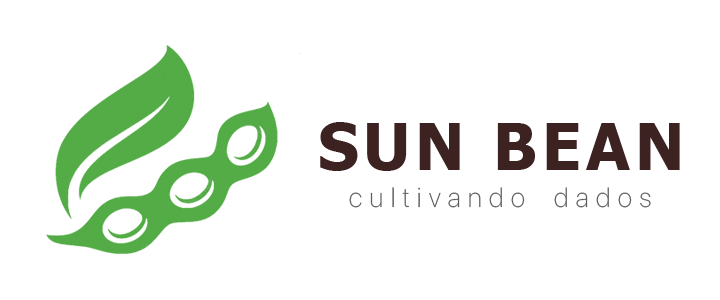
<style>
.page{position:relative;width:720px;height:300px;background:#ffffff}
.page>*{position:absolute;margin:0}
.t1{font:63.9px "Tahoma-Bold";letter-spacing:0.08em;color:#3d2222}
.t2{font:27.6px "SFProDisplay-Thin";letter-spacing:0.28em;color:#5d5d5d;scale:0.97 1}
</style>
<div class="page">
<p class="t1" style="left:320px;top:122px;width:360px;height:49px">SUN BEAN</p>
<p class="t2" style="left:349px;top:187px;width:302px;height:21px">cultivando dados</p>
</div>
